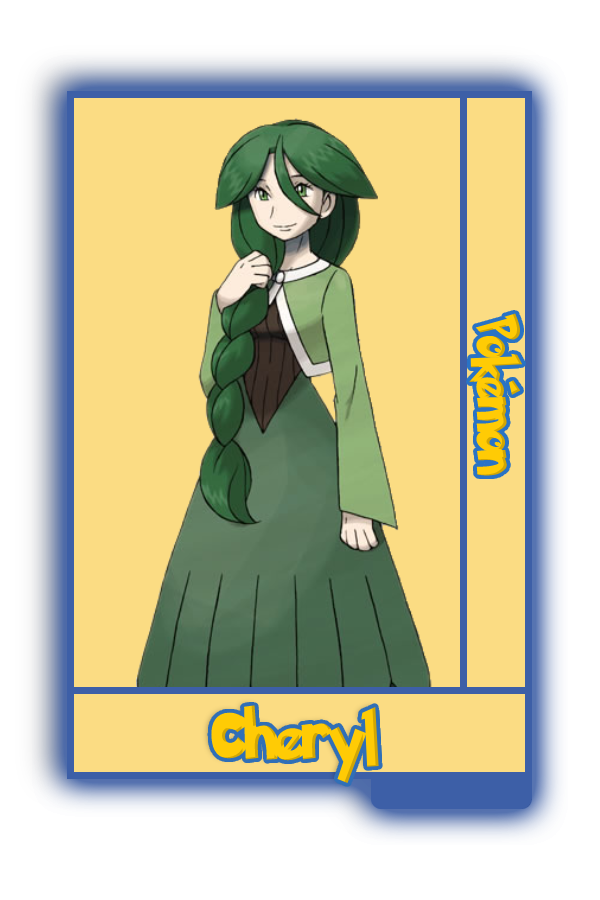
<style>
.page{position:relative;width:600px;height:900px;background:#fbdc83}
.page>*{position:absolute;margin:0}
.t1{font:48.8px "PokemonSolidNormal";color:#ffcb05;scale:0.8 1}
.t2{font:56.6px "PokemonSolidNormal";color:#ffcb05;scale:0.92 1}
</style>
<div class="page">
<p class="t1" style="left:469px;top:313px;width:54px;height:163px;rotate:90deg">Pokémon</p>
<p class="t2" style="left:211px;top:705px;width:168px;height:78px">Cheryl</p>
</div>
